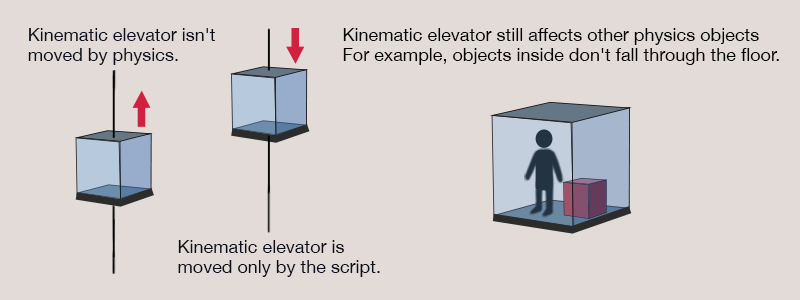
<style>
.page{position:relative;width:800px;height:300px;background:#e2dbd8}
.page>*{position:absolute;margin:0}
.t1{font:18px/20px "HelveticaNeue";color:#0c0f1b}
.t2{font:18px/20px "HelveticaNeue";color:#000000}
</style>
<div class="page">
<p class="t1" style="left:28px;top:28px;width:187px;height:37px">Kinematic elevator isn't <br>moved by physics.</p>
<p class="t2" style="left:343px;top:28px;width:436px;height:37px">Kinematic elevator still affects other physics objects<br>For example, objects inside don't fall through the floor.</p>
<p class="t1" style="left:178px;top:240px;width:202px;height:37px">Kinematic elevator is <br>moved only by the script.</p>
</div>
